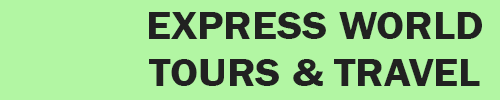
<style>
.page{position:relative;width:500px;height:100px;background:#b2f6a3}
.page>*{position:absolute;margin:0}
.t1{font:39.9px/46.8px "FranklinGothic-Demi";color:#212121;scale:1.09 1}
</style>
<div class="page">
<p class="t1" style="left:149px;top:12px;width:333px;height:74px;text-align:center">EXPRESS WORLD<br>TOURS &amp; TRAVEL</p>
</div>
